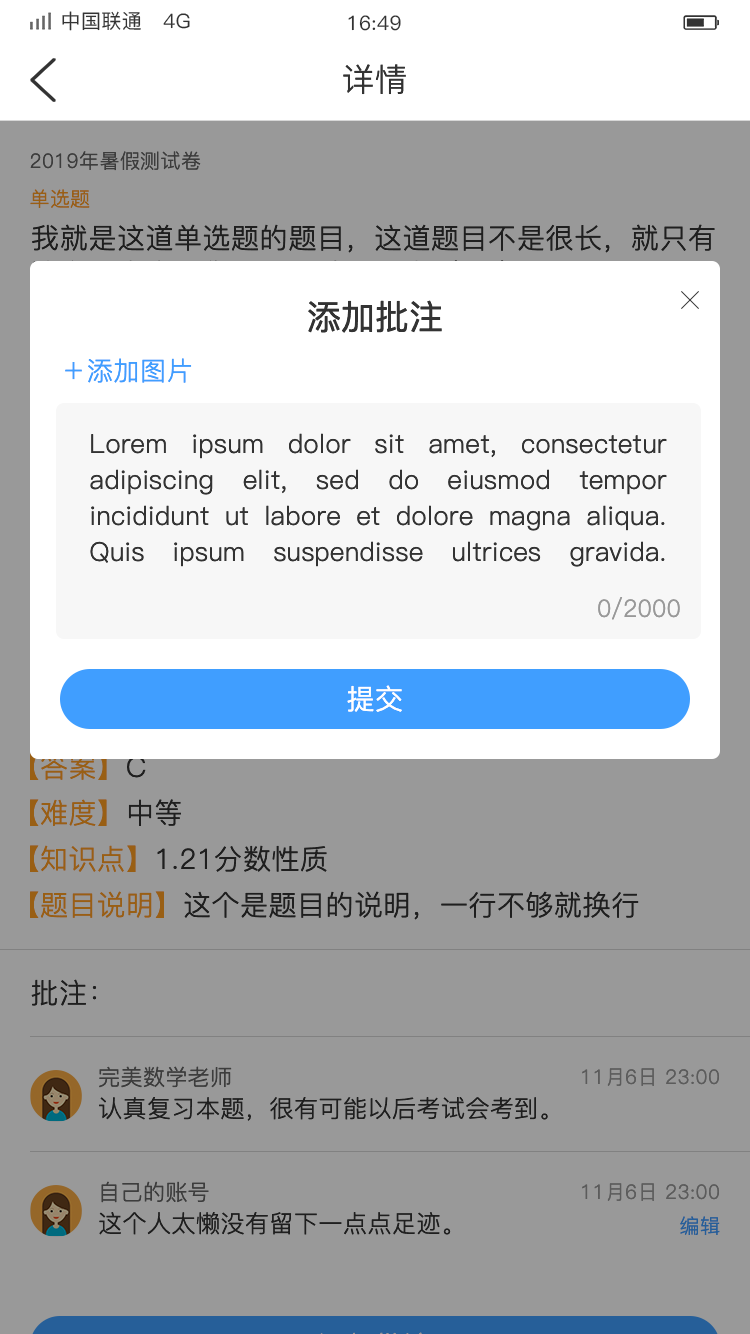
<style>
.page{position:relative;width:750px;height:1334px;background:#999999}
.page>*{position:absolute;margin:0}
.t1{font:20px "PingFang-SC-Medium";letter-spacing:0.02em;color:#333333}
.t2{font:32px "PingFang-SC-Regular";letter-spacing:0.02em;color:#333333}
.t3{font:20px "PingFang-SC-Regular";letter-spacing:0.02em;color:#3d3d3d}
.t4{font:20px "PingFang-SC-Regular";letter-spacing:0.02em;color:#995f14}
.t5{font:28px/36px "PingFang-SC-Regular";letter-spacing:0.02em;color:#333333}
.t6{font:34px "PingFang-SC-Medium";color:#333333}
.t7{font:26px "PingFang-SC-Regular";letter-spacing:0.02em;color:#409eff}
.t8{font:26px/36px "PingFang-SC-Regular";letter-spacing:0.02em;color:#333333}
.t9{font:26px/36px "PingFang-SC-Regular";letter-spacing:0.02em;color:#409eff}
.t10{font:24px "PingFang-SC-Regular";color:#999999}
.t11{font:28px "PingFang-SC-Regular";letter-spacing:0.02em;color:#ffffff}
.t12{font:28px "PingFang-SC-Regular";letter-spacing:0.02em}
.t13{font:28px "PingFang-SC-Regular";letter-spacing:0.02em;color:#333333}
.t14{font:28px "PingFang-SC-Regular";letter-spacing:0.02em;color:#ff9e21}
.t15{font:22px "PingFang-SC-Regular";letter-spacing:0.02em;color:#3d3d3d}
.t16{font:20px "PingFang-SC-Regular";letter-spacing:0.02em;color:#5c5c5c}
.t17{font:24px "PingFang-SC-Regular";letter-spacing:0.02em;color:#333333}
.t18{font:20px "PingFang-SC-Regular";letter-spacing:0.02em;color:#265f99}
</style>
<div class="page">
<p class="t1" style="left:62px;top:11px;width:128px;height:20px">中国联通   4G</p>
<p class="t1" style="left:348px;top:15px;width:53px;height:16px">16:49</p>
<p class="t2" style="left:343px;top:64px;width:63px;height:31px">详情</p>
<p class="t3" style="left:30px;top:151px;width:171px;height:20px">2019年暑假测试卷</p>
<p class="t4" style="left:30px;top:189px;width:60px;height:19px">单选题</p>
<p class="t5" style="left:32px;top:224px;width:683px;height:65px">我就是这道单选题的题目，这道题目不是很长，就只有这么一点点，你看看想选哪一个（    ）</p>
<p class="t6" style="left:308px;top:300px;width:134px;height:33px">添加批注</p>
<p class="t7" style="left:65px;top:358px;width:127px;height:25px">＋添加图片</p>
<p class="t8" style="left:90px;top:433px;width:577px;height:134px;text-align:justify">Lorem ipsum dolor sit amet, consectetur adipiscing elit, sed do eiusmod tempor incididunt ut labore et dolore magna aliqua. Quis ipsum suspendisse ultrices gravida. <span class="t9"> commodo viverra maecenas accumsan lacus vel facilisis.</span></p>
<p class="t10" style="left:598px;top:597px;width:82px;height:23px">0/2000</p>
<p class="t11" style="left:347px;top:685px;width:55px;height:27px">提交</p>
<p class="t12" style="left:30px;top:753px;width:116px;height:27px">【答案】C</p>
<p class="t12" style="left:30px;top:799px;width:151px;height:27px">【难度】中等</p>
<p class="t12" style="left:30px;top:845px;width:297px;height:27px">【知识点】1.21分数性质</p>
<p class="t13" style="left:30px;top:891px;width:609px;height:29px"><span class="t14">【题目说明】</span>这个是题目的说明，一行不够就换行</p>
<p class="t13" style="left:31px;top:979px;width:66px;height:27px">批注：</p>
<p class="t15" style="left:99px;top:1066px;width:133px;height:22px">完美数学老师</p>
<p class="t16" style="left:582px;top:1068px;width:137px;height:18px">11月6日 23:00</p>
<p class="t17" style="left:99px;top:1097px;width:449px;height:24px">认真复习本题，很有可能以后考试会考到。</p>
<p class="t15" style="left:101px;top:1181px;width:108px;height:22px">自己的账号</p>
<p class="t16" style="left:582px;top:1183px;width:137px;height:18px">11月6日 23:00</p>
<p class="t17" style="left:99px;top:1212px;width:352px;height:23px">这个人太懒没有留下一点点足迹。</p>
<p class="t18" style="left:680px;top:1216px;width:40px;height:19px">编辑</p>
</div>
